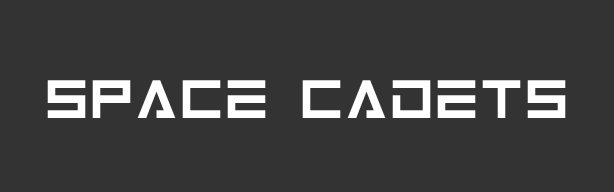
<style>
.page{position:relative;width:614px;height:192px;background:#333333}
.page>*{position:absolute;margin:0}
.t1{font:60px "Android101";color:#ffffff}
</style>
<div class="page">
<p class="t1" style="left:47px;top:80px;width:519px;height:38px">Space Cadets</p>
</div>
